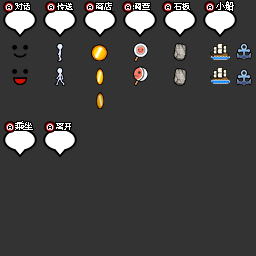
<style>
.page{position:relative;width:256px;height:256px;background:#333333}
.page>*{position:absolute;margin:0}
.t1{font:8px "ZpixEX2";color:#ffffff}
.t2{font:9px "ZpixEX2";color:#ffffff}
</style>
<div class="page">
<p class="t1" style="left:15px;top:3px;width:15px;height:7px">对话</p>
<p class="t1" style="left:15px;top:3px;width:15px;height:7px">对话</p>
<p class="t1" style="left:57px;top:3px;width:16px;height:7px">传送</p>
<p class="t1" style="left:57px;top:3px;width:16px;height:7px">传送</p>
<p class="t1" style="left:96px;top:2px;width:16px;height:8px">商店</p>
<p class="t1" style="left:96px;top:2px;width:16px;height:8px">商店</p>
<p class="t1" style="left:135px;top:3px;width:15px;height:7px">调查</p>
<p class="t1" style="left:135px;top:3px;width:15px;height:7px">调查</p>
<p class="t1" style="left:174px;top:3px;width:16px;height:7px">石板</p>
<p class="t1" style="left:174px;top:3px;width:16px;height:7px">石板</p>
<p class="t2" style="left:216px;top:1px;width:18px;height:10px">小船</p>
<p class="t2" style="left:216px;top:1px;width:18px;height:10px">小船</p>
<p class="t2" style="left:15px;top:121px;width:18px;height:9px">乘坐</p>
<p class="t1" style="left:56px;top:123px;width:15px;height:7px">离开</p>
<p class="t1" style="left:56px;top:123px;width:15px;height:7px">离开</p>
</div>
